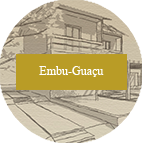
<style>
.page{position:relative;width:142px;height:143px}
.page>*{position:absolute;margin:0}
.t1{font:12px "TimesNewRomanPSMT";color:#ffffff}
</style>
<div class="page">
<p class="t1" style="left:39px;top:66px;width:65px;height:11px">Embu-Guaçu</p>
</div>
